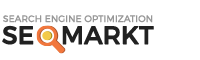
<style>
.page{position:relative;width:200px;height:60px;background:#ffffff}
.page>*{position:absolute;margin:0}
.t1{font:9px "Montserrat-Light";color:#979797;font-weight:bold}
.t2{font:25px "Montserrat-Regular";letter-spacing:-0.02em;color:#212121;font-weight:bold}
</style>
<div class="page">
<p class="t1" style="left:3px;top:15px;width:150px;height:8px">SEARCH ENGINE OPTIMIZATION</p>
<p class="t2" style="left:2px;top:25px;width:152px;height:20px">SE    MARKT</p>
</div>
